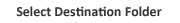
<style>
.page{position:relative;width:180px;height:23px;background:#ffffff}
.page>*{position:absolute;margin:0}
.t1{font:14px "Calibri-Bold";color:#363535}
</style>
<div class="page">
<p class="t1" style="left:16px;top:6px;width:146px;height:11px">Select Destination Folder</p>
</div>
